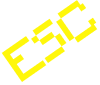
<style>
.page{position:relative;width:100px;height:85px;background:#ffffff}
.page>*{position:absolute;margin:0}
.t1{font:47.4px "Minecraft";color:#fff70b}
</style>
<div class="page">
<p class="t1" style="left:1px;top:0px;width:97px;height:82px;rotate:-35deg">ESC</p>
</div>
